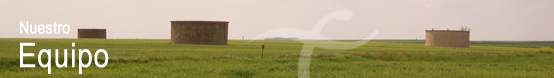
<style>
.page{position:relative;width:554px;height:78px}
.page>*{position:absolute;margin:0}
.t1{font:16.7px "ArialNarrow";color:#ffffff;font-weight:bold}
.t2{font:34px "ArialNarrow";color:#ffffff;font-weight:bold}
</style>
<div class="page">
<p class="t1" style="left:20px;top:21px;width:50px;height:13px">Nuestro</p>
<p class="t2" style="left:20px;top:42px;width:89px;height:32px">Equipo</p>
</div>
